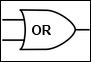
<style>
.page{position:relative;width:91px;height:62px;background:#ffffff}
.page>*{position:absolute;margin:0}
.t1{font:13.3px "Arial-BoldMT";color:#000000}
</style>
<div class="page">
<p class="t1" style="left:32px;top:25px;width:19px;height:10px">OR</p>
</div>
